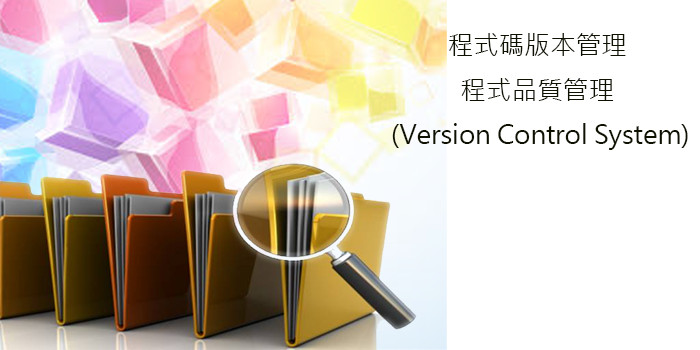
<style>
.page{position:relative;width:700px;height:350px;background:#ffffff}
.page>*{position:absolute;margin:0}
.t1{font:25.6px "MicrosoftJhengHeiRegular";color:#0e1100}
</style>
<div class="page">
<p class="t1" style="left:392px;top:33px;width:296px;height:117px;text-align:center">程式碼版本管理<br>程式品質管理<br> (Version Control System)</p>
</div>
